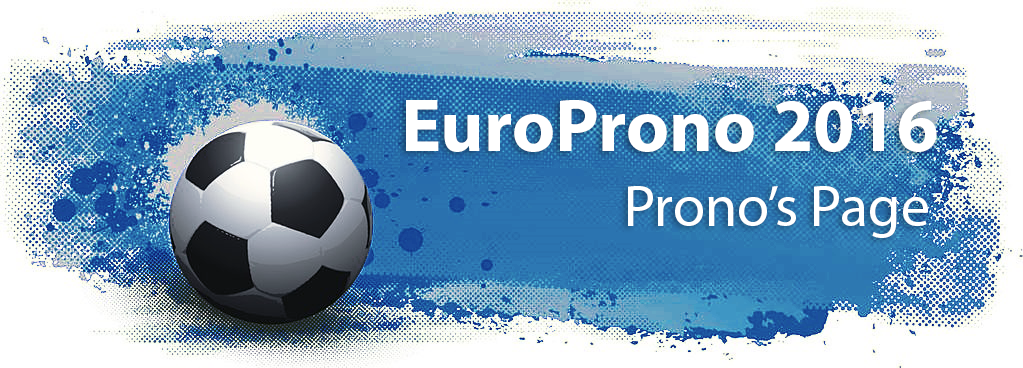
<style>
.page{position:relative;width:1023px;height:368px}
.page>*{position:absolute;margin:0}
.t1{font:75px "MyriadPro-Bold";color:#ffffff}
.t2{font:58.3px "MyriadPro-Regular";color:#ffffff}
</style>
<div class="page">
<p class="t1" style="left:406px;top:100px;width:531px;height:52px">EuroProno 2016</p>
<p class="t2" style="left:628px;top:186px;width:300px;height:52px">Prono’s Page</p>
</div>
